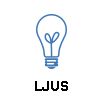
<style>
.page{position:relative;width:100px;height:100px;background:#ffffff}
.page>*{position:absolute;margin:0}
.t1{font:14px "Arial-BoldMT";color:#000000}
</style>
<div class="page">
<p class="t1" style="left:35px;top:81px;width:33px;height:10px">LJUS</p>
</div>
